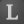
<style>
.page{position:relative;width:24px;height:24px}
.page>*{position:absolute;margin:0}
.t1{font:24px "GentiumBasic-Bold";color:#cdcdcd}
</style>
<div class="page">
<p class="t1" style="left:6px;top:4px;width:12px;height:16px">L</p>
</div>
